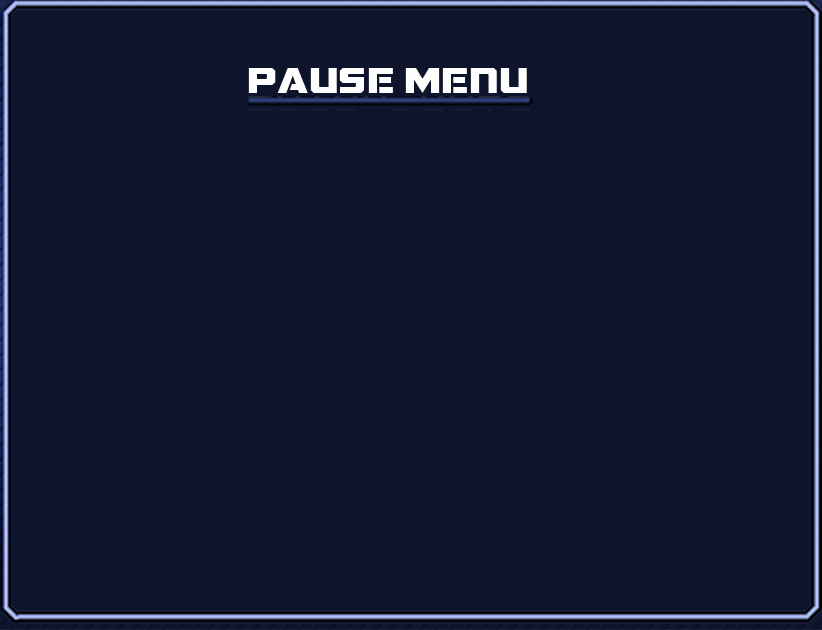
<style>
.page{position:relative;width:822px;height:630px;background:#0d142b}
.page>*{position:absolute;margin:0}
.t1{font:34.5px "GALACTICVANGUARDIANNCV";color:#fefefe;scale:1.08 1}
</style>
<div class="page">
<p class="t1" style="left:248px;top:68px;width:279px;height:25px">Pause Menu</p>
</div>
